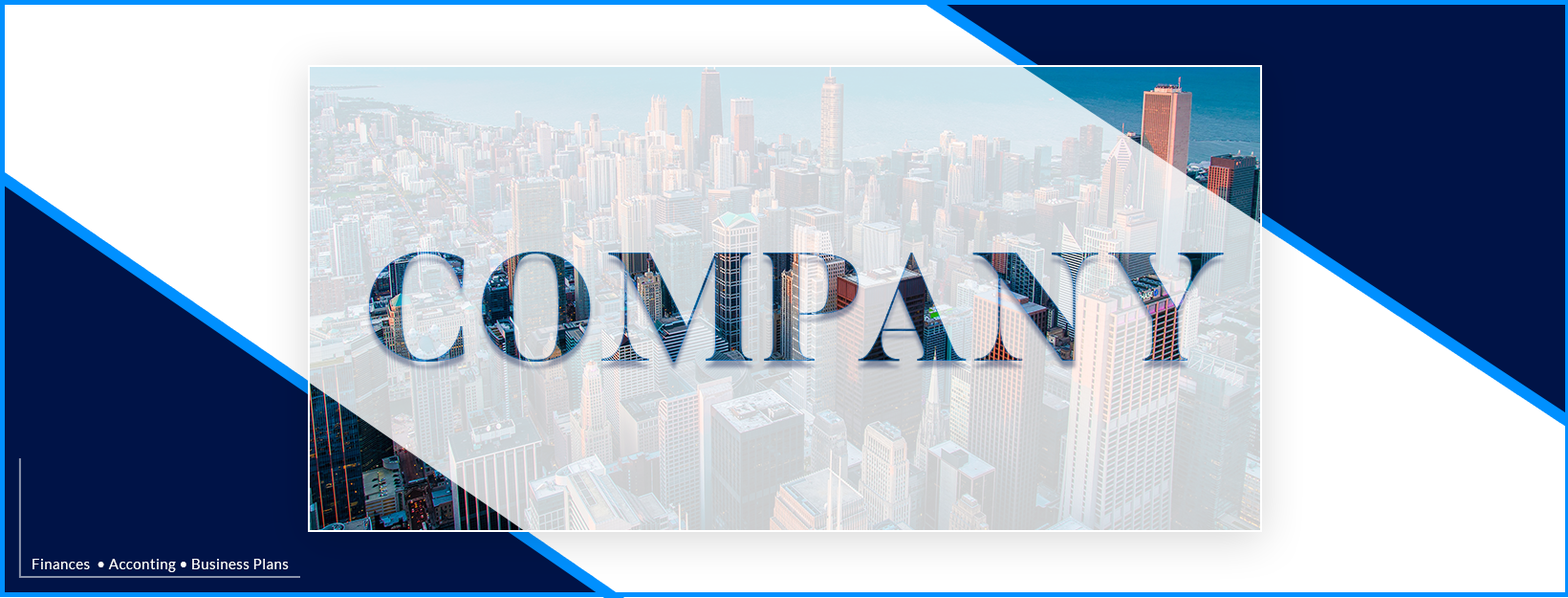
<style>
.page{position:relative;width:1568px;height:598px}
.page>*{position:absolute;margin:0}
.t1{font:153px "Butler-ExtraBold";letter-spacing:0.03em;text-transform:uppercase}
.t2{font:14.3px "Lato-Regular";letter-spacing:0.03em;color:#ffffff}
</style>
<div class="page">
<p class="t1" style="left:369px;top:251px;width:855px;height:111px">Company</p>
<p class="t2" style="left:33px;top:558px;width:256px;height:14px">Finances  • Acconting • Business Plans</p>
</div>
